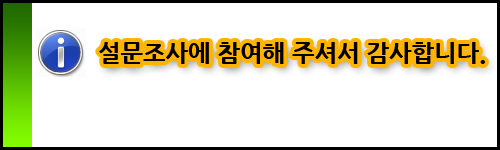
<style>
.page{position:relative;width:500px;height:150px;background:#ffffff}
.page>*{position:absolute;margin:0}
.t1{font:24px "NanumGothicExtraBold";color:#000000}
</style>
<div class="page">
<p class="t1" style="left:99px;top:42px;width:386px;height:22px">설문조사에 참여해 주셔서 감사합니다.</p>
</div>
